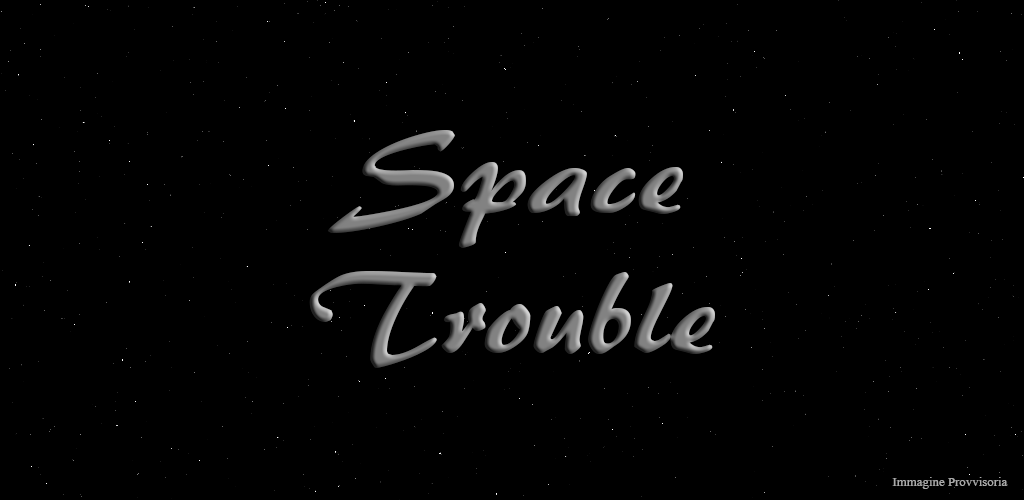
<style>
.page{position:relative;width:1024px;height:500px;background:#000000}
.page>*{position:absolute;margin:0}
.t1{font:117.1px "ARBERKLEY";scale:1.11 1}
.t2{font:16px "Aparajita";color:#aaaaaa}
</style>
<div class="page">
<p class="t1" style="left:309px;top:130px;width:406px;height:238px;text-align:center">Space<br>Trouble</p>
<p class="t2" style="left:892px;top:477px;width:116px;height:12px">Immagine Provvisoria</p>
</div>
